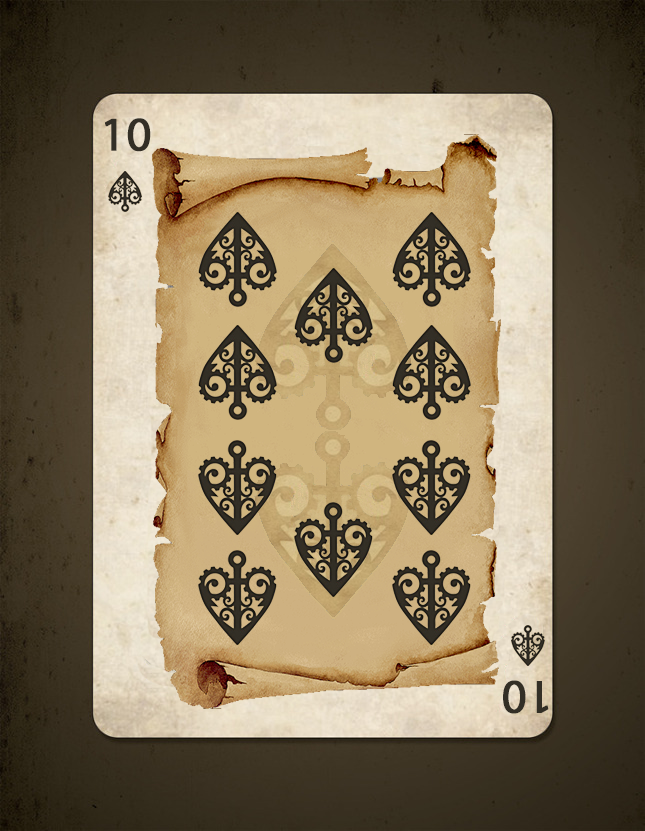
<style>
.page{position:relative;width:645px;height:831px}
.page>*{position:absolute;margin:0}
.t1{font:48px "MyriadPro-Regular";color:#332f26;font-weight:bold}
</style>
<div class="page">
<p class="t1" style="left:105px;top:118px;width:46px;height:34px">10</p>
<p class="t1" style="left:503px;top:680px;width:46px;height:34px;rotate:180deg">10</p>
</div>
